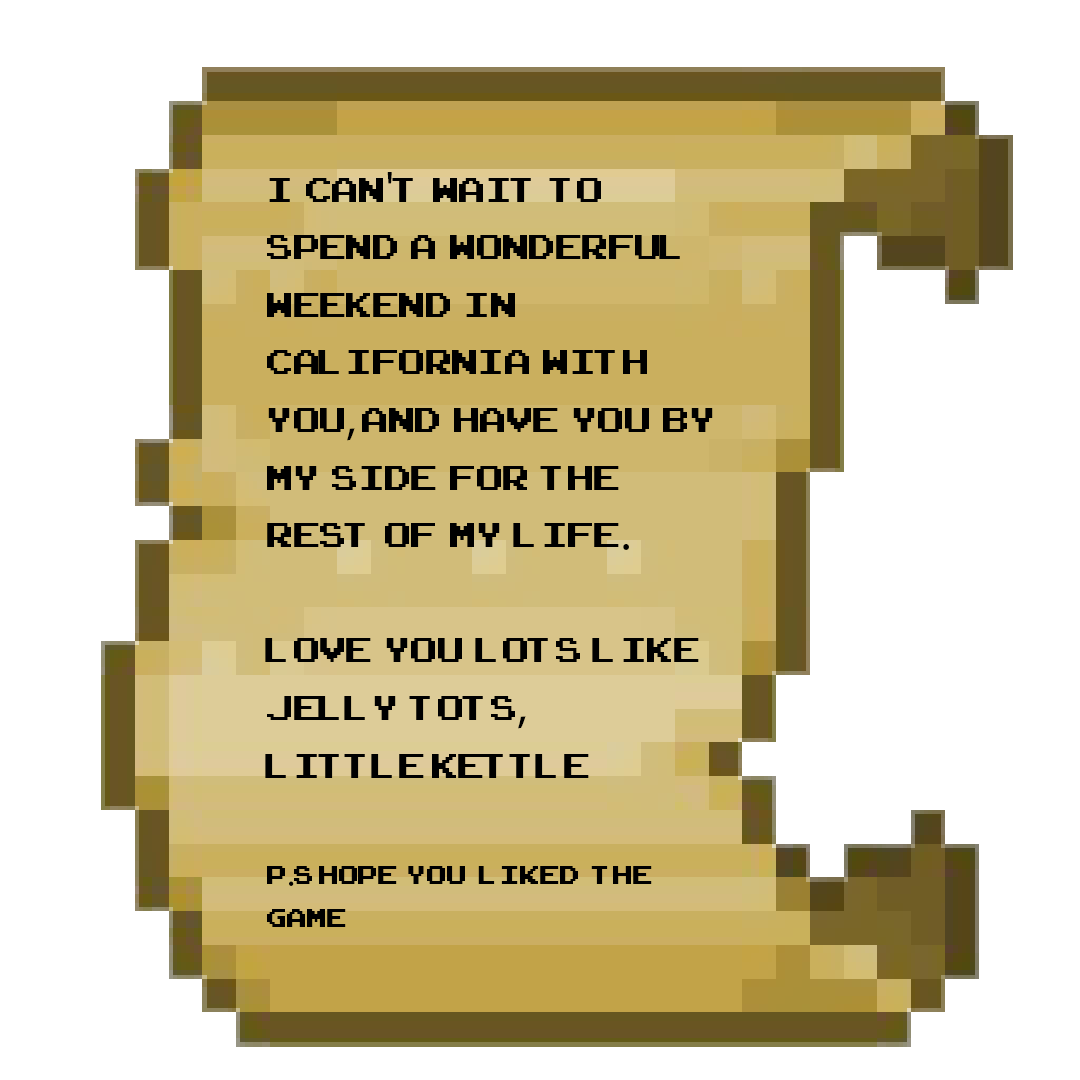
<style>
.page{position:relative;width:1080px;height:1080px;background:#ffffff}
.page>*{position:absolute;margin:0}
.t1{font:48px "ArcadeClassic";color:#000000}
.t2{font:48px "MyriadPro-Regular";color:#000000}
.t3{font:36px "ArcadeClassic";color:#000000}
.t4{font:36px "MyriadPro-Regular";color:#000000}
</style>
<div class="page">
<p class="t1" style="left:265px;top:172px;width:448px;height:755px">I  CAN<span class="t2">'</span>t  wait  to  spend  a  wonderful  weekend  in  california  with  you<span class="t2">,</span> and  have  you  by  my  side  for  the  rest  of  my  life<span class="t2">.</span> <br><br>Love  you  lots  like  jelly  tots<span class="t2">,</span><br>Little Kettle<br><br><span class="t3">p</span><span class="t4">.</span><span class="t3">s hope  you   liked   the game</span></p>
</div>
